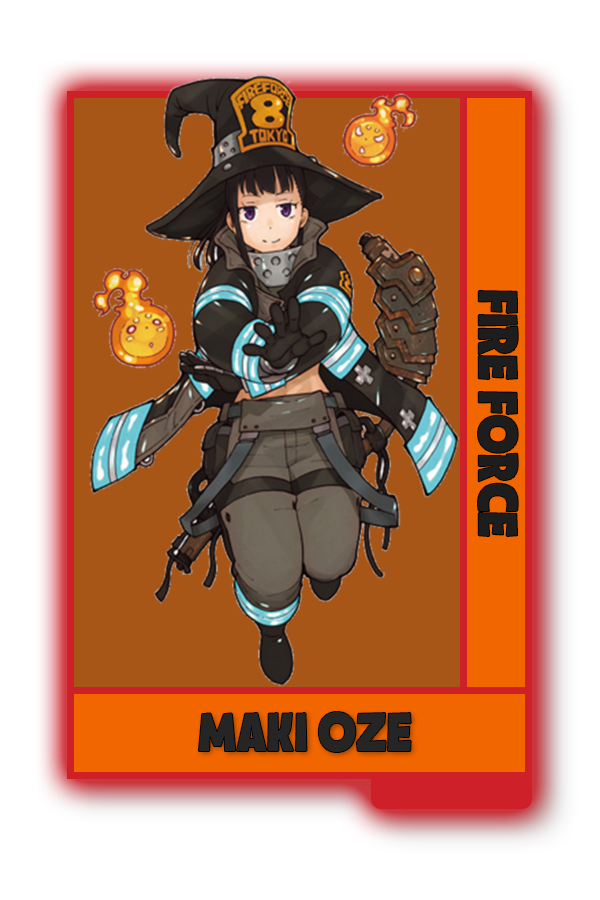
<style>
.page{position:relative;width:600px;height:900px;background:#ffffff}
.page>*{position:absolute;margin:0}
.t1{font:69.6px "AristonComicDemo-Regular";color:#1d1d1d}
.t2{font:69.1px "AristonComicDemo-Regular";color:#252525}
</style>
<div class="page">
<p class="t1" style="left:478px;top:291px;width:40px;height:245px;rotate:90deg">FIRE FORCE</p>
<p class="t2" style="left:198px;top:712px;width:213px;height:40px">MAKI OZE</p>
</div>
